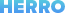
<style>
.page{position:relative;width:65px;height:13px;background:#ffffff}
.page>*{position:absolute;margin:0}
.t1{font:19px "ProximaNova-Black";letter-spacing:-0.025em;color:#51b0e8}
.t2{font:19px "ProximaNova-Black";letter-spacing:0.05em;color:#51b0e8}
.t3{font:19px "ProximaNova-Black";color:#51b0e8}
.t4{font:19px "ProximaNova-Black";letter-spacing:0.01em;color:#51b0e8}
.t5{font:19px "ProximaNova-Black";letter-spacing:-0.03em;color:#51b0e8}
</style>
<div class="page">
<p class="t1" style="left:0px;top:0px;width:65px;height:13px">H<span class="t2">E</span><span class="t3">R</span><span class="t4">R</span><span class="t5">O</span></p>
</div>
